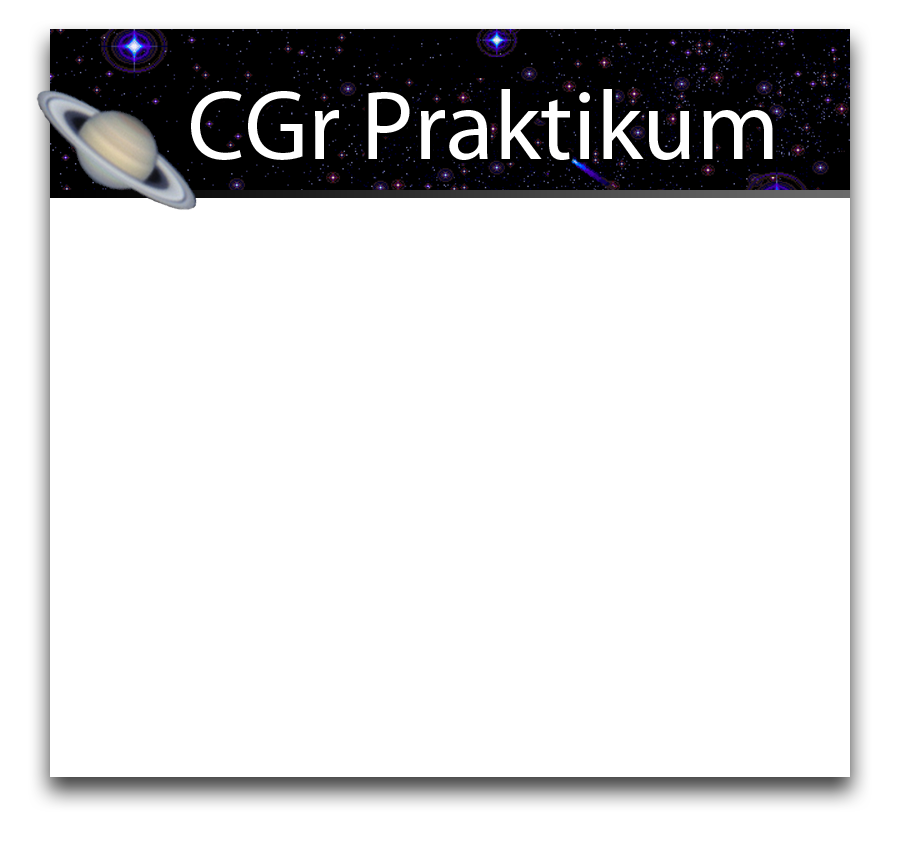
<style>
.page{position:relative;width:900px;height:845px;background:#ffffff}
.page>*{position:absolute;margin:0}
.t1{font:98.8px "MyriadPro-Regular";color:#ffffff}
</style>
<div class="page">
<p class="t1" style="left:191px;top:89px;width:582px;height:71px">CGr Praktikum</p>
</div>
